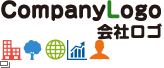
<style>
.page{position:relative;width:164px;height:68px;background:#ffffff}
.page>*{position:absolute;margin:0}
.t1{font:21.3px "Jun501Pro-Bold";color:#231815;font-weight:bold}
.t2{font:21.3px "Jun501Pro-Bold";color:#288321;font-weight:bold}
.t3{font:15.9px "Jun501Pro-Bold";color:#231815;font-weight:bold}
</style>
<div class="page">
<p class="t1" style="left:1px;top:0px;width:160px;height:21px">Company<span class="t2">L</span>ogo</p>
<p class="t3" style="left:97px;top:23px;width:65px;height:17px">会社ロゴ</p>
</div>
